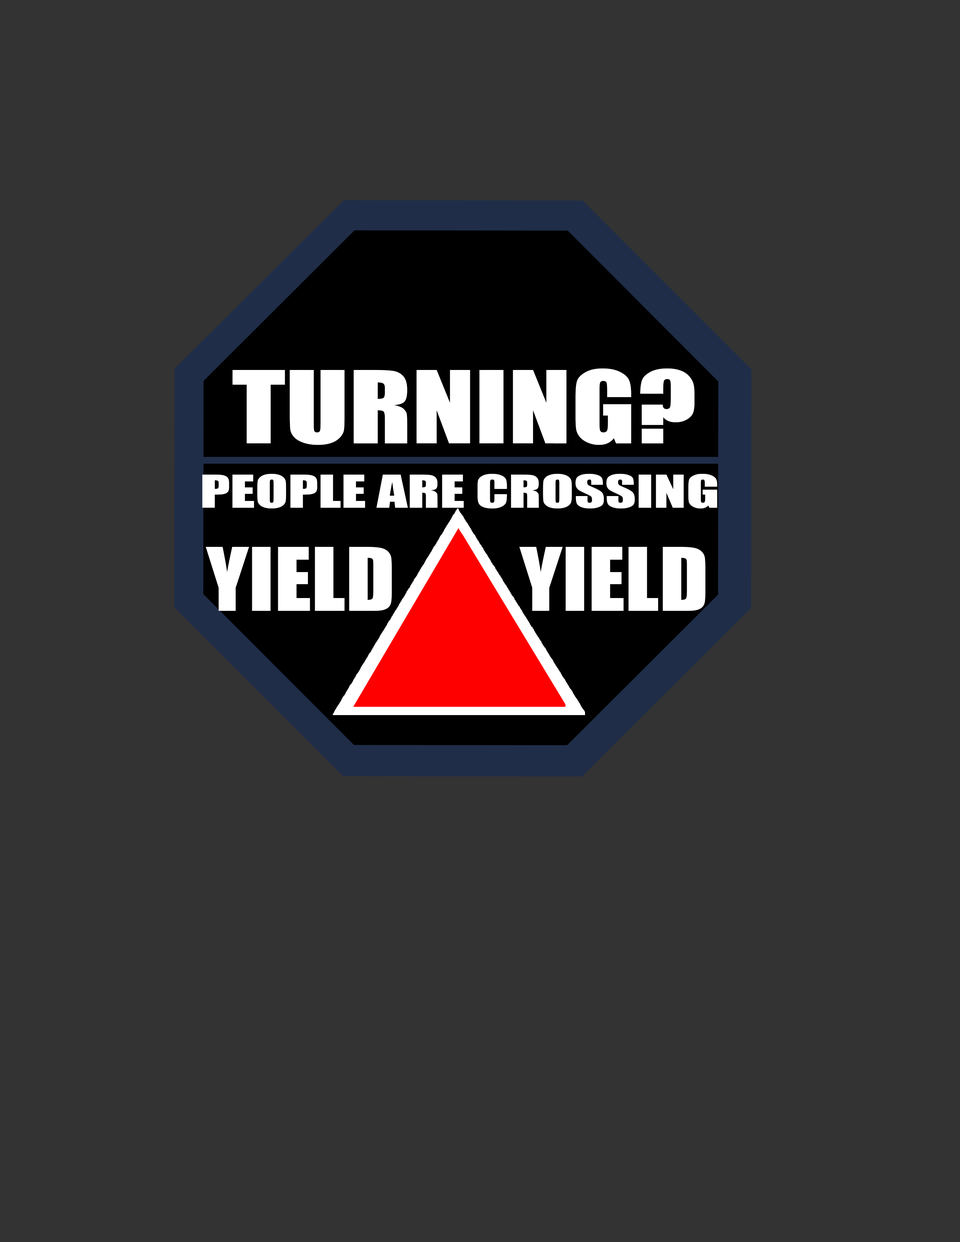
<style>
.page{position:relative;width:960px;height:1242px;background:#333333}
.page>*{position:absolute;margin:0}
.t1{font:93.2px "Impact";color:#ffffff;scale:1.25 1}
.t2{font:41.7px "Impact";color:#ffffff;scale:1.44 1}
.t3{font:80.9px "Impact";color:#ffffff;scale:1.1 1}
</style>
<div class="page">
<p class="t1" style="left:232px;top:369px;width:463px;height:76px">TURNING?</p>
<p class="t2" style="left:202px;top:474px;width:515px;height:35px">PEOPLE ARE CROSSING</p>
<p class="t3" style="left:206px;top:547px;width:186px;height:64px">YIELD</p>
<p class="t3" style="left:519px;top:547px;width:186px;height:64px">YIELD</p>
</div>
